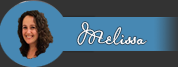
<style>
.page{position:relative;width:178px;height:67px;background:#333333}
.page>*{position:absolute;margin:0}
.t1{font:18px "MitreSquare";color:#ffffff}
</style>
<div class="page">
<p class="t1" style="left:77px;top:22px;width:70px;height:23px">Melissa</p>
</div>
